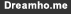
<style>
.page{position:relative;width:71px;height:14px;background:#333333}
.page>*{position:absolute;margin:0}
.t1{font:10px "Arial-BoldMT";letter-spacing:0.02em;color:#ffffff}
</style>
<div class="page">
<p class="t1" style="left:4px;top:1px;width:64px;height:8px">Dreamho.me</p>
</div>
